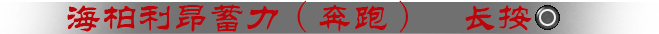
<style>
.page{position:relative;width:659px;height:34px;background:#707070}
.page>*{position:absolute;margin:0}
.t1{font:36px "STLiti";color:#ba060b}
.t2{font:36px "FangSong";color:#ba060b}
</style>
<div class="page">
<p class="t1" style="left:67px;top:0px;width:465px;height:33px">海柏利昂蓄力<span class="t2">(</span>奔跑<span class="t2">)  </span>长按</p>
</div>
